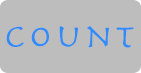
<style>
.page{position:relative;width:141px;height:73px;background:#bdbdbd}
.page>*{position:absolute;margin:0}
.t1{font:34.4px "Herculanum";letter-spacing:0.065em;color:#308bfc;scale:1.12 1}
</style>
<div class="page">
<p class="t1" style="left:6px;top:26px;width:128px;height:22px">Count</p>
</div>
